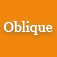
<style>
.page{position:relative;width:57px;height:57px;background:#f0860b}
.page>*{position:absolute;margin:0}
.t1{font:14px "Georgia";color:#ffffff}
</style>
<div class="page">
<p class="t1" style="left:3px;top:21px;width:50px;height:14px">Oblique</p>
</div>
